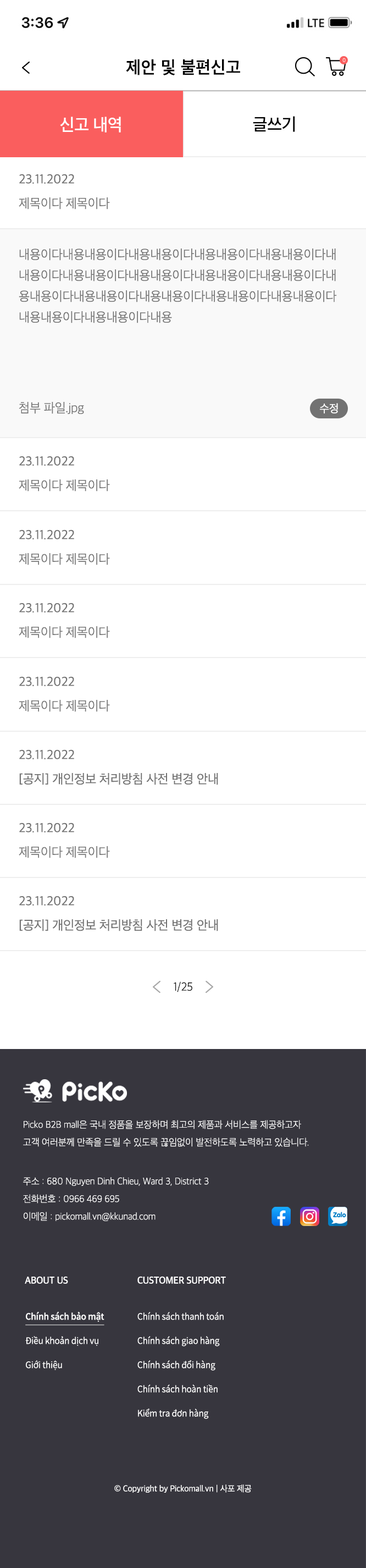
<style>
.page{position:relative;width:366px;height:1568px;background:#ffffff}
.page>*{position:absolute;margin:0}
.t1{font:17.6px "AppleSDGothicNeo-SemiBold";letter-spacing:0.017em;color:#000000}
.t2{font:5.4px "AppleSDGothicNeo-UltraLight";letter-spacing:-0.01em;color:#ffffff}
.t3{font:17.6px "AppleSDGothicNeo-Medium";letter-spacing:-0.01em;color:#ffffff;scale:0.97 1}
.t4{font:17.6px "AppleSDGothicNeo-Medium";letter-spacing:-0.01em;color:#020202;scale:0.97 1}
.t5{font:13.2px "AppleSDGothicNeo-Regular";letter-spacing:-0.01em;color:#727272}
.t6{font:13.2px "AppleSDGothicNeo-Light";letter-spacing:-0.01em;color:#757575}
.t7{font:13.2px/20.9px "AppleSDGothicNeo-Light";letter-spacing:-0.01em;color:#727272}
.t8{font:11.5px "AppleSDGothicNeo-Regular";letter-spacing:-0.01em;color:#ffffff}
.t9{font:12px "AppleSDGothicNeo-UltraLight";letter-spacing:-0.01em;color:#000000}
.t10{font:9.9px/17.6px "AppleSDGothicNeo-UltraLight";letter-spacing:-0.01em;color:#ffffff;scale:0.97 1}
.t11{font:9.9px "AppleSDGothicNeo-SemiBold";letter-spacing:-0.01em;color:#ffffff;scale:0.97 1}
.t12{font:9.9px "AppleSDGothicNeo-SemiBold";letter-spacing:-0.01em;color:#ffffff;text-transform:uppercase;scale:0.97 1}
.t13{font:8.8px/24.2px "NotoSansCJKkr-DemiLight";letter-spacing:-0.01em;color:#ffffff;scale:0.97 1}
.t14{font:8.8px/24.2px "NotoSansCJKkr-Medium";letter-spacing:-0.01em;color:#ffffff;text-decoration:underline;scale:0.97 1}
.t15{font:8.8px "AppleSDGothicNeo-Regular";letter-spacing:-0.01em;color:#ffffff;scale:0.97 1}
</style>
<div class="page">
<p class="t1" style="left:126px;top:59px;width:114px;height:16px">제안 및 불편신고</p>
<p class="t2" style="left:343px;top:58px;width:3px;height:4px">0</p>
<p class="t3" style="left:60px;top:117px;width:61px;height:15px">신고 내역</p>
<p class="t4" style="left:253px;top:116px;width:42px;height:16px">글쓰기</p>
<p class="t5" style="left:19px;top:174px;width:55px;height:10px">23.11.2022</p>
<p class="t6" style="left:19px;top:197px;width:91px;height:12px">제목이다 제목이다</p>
<p class="t7" style="left:19px;top:249px;width:318px;height:74px">내용이다내용내용이다내용내용이다내용내용이다내용내용이다내<br>내용이다내용내용이다내용내용이다내용내용이다내용내용이다내<br>용내용이다내용내용이다내용내용이다내용내용이다내용내용이다<br>내용내용이다내용내용이다내용</p>
<p class="t6" style="left:19px;top:402px;width:65px;height:12px">첨부 파일.jpg</p>
<p class="t8" style="left:320px;top:403px;width:18px;height:10px">수정</p>
<p class="t5" style="left:19px;top:456px;width:55px;height:10px">23.11.2022</p>
<p class="t6" style="left:19px;top:479px;width:91px;height:13px">제목이다 제목이다</p>
<p class="t5" style="left:19px;top:529px;width:55px;height:10px">23.11.2022</p>
<p class="t6" style="left:19px;top:553px;width:91px;height:12px">제목이다 제목이다</p>
<p class="t5" style="left:19px;top:603px;width:55px;height:9px">23.11.2022</p>
<p class="t6" style="left:19px;top:626px;width:91px;height:12px">제목이다 제목이다</p>
<p class="t5" style="left:19px;top:676px;width:55px;height:10px">23.11.2022</p>
<p class="t6" style="left:19px;top:700px;width:91px;height:12px">제목이다 제목이다</p>
<p class="t5" style="left:19px;top:749px;width:55px;height:10px">23.11.2022</p>
<p class="t5" style="left:19px;top:773px;width:199px;height:12px">[공지] 개인정보 처리방침 사전 변경 안내</p>
<p class="t5" style="left:19px;top:822px;width:55px;height:10px">23.11.2022</p>
<p class="t6" style="left:19px;top:846px;width:91px;height:12px">제목이다 제목이다</p>
<p class="t5" style="left:19px;top:896px;width:55px;height:10px">23.11.2022</p>
<p class="t5" style="left:19px;top:919px;width:199px;height:12px">[공지] 개인정보 처리방침 사전 변경 안내</p>
<p class="t9" style="left:174px;top:981px;width:18px;height:11px">1/25</p>
<p class="t10" style="left:23px;top:1120px;width:286px;height:27px">Picko B2B mall은 국내 정품을 보장하며 최고의 제품과 서비스를 제공하고자<br>고객 여러분께 만족을 드릴 수 있도록 끊임없이 발전하도록 노력하고 있습니다.</p>
<p class="t10" style="left:23px;top:1177px;width:186px;height:44px">주소 : 680 Nguyen Dinh Chieu, Ward 3, District 3<br>전화번호 : 0966 469 695<br>이메일 : pickomall.vn@kkunad.com</p>
<p class="t11" style="left:25px;top:1276px;width:43px;height:8px">ABOUT US</p>
<p class="t12" style="left:137px;top:1276px;width:89px;height:8px">Customer Support</p>
<p class="t13" style="left:25px;top:1311px;width:79px;height:59px"><span class="t14">Chính sách bảo mật<br></span>Điều khoản dịch vụ<br>Giới thiệu</p>
<p class="t13" style="left:137px;top:1312px;width:87px;height:107px">Chính sách thanh toán<br>Chính sách giao hàng<br>Chính sách đổi hàng<br>Chính sách hoàn tiền<br>Kiểm tra đơn hàng</p>
<p class="t15" style="left:114px;top:1484px;width:138px;height:9px">© Copyright by Pickomall.vn | 사포 제공</p>
</div>
